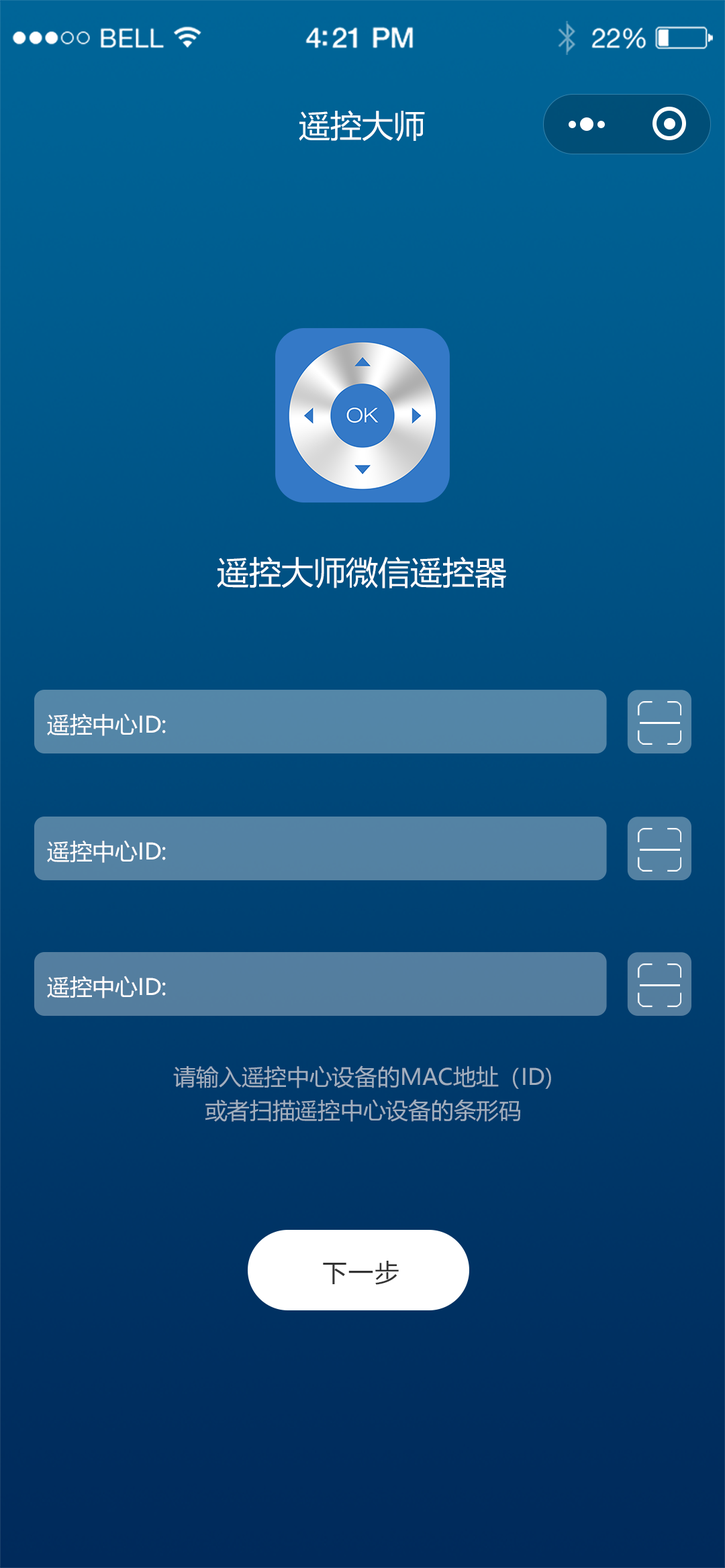
<style>
.page{position:relative;width:725px;height:1568px}
.page>*{position:absolute;margin:0}
.t1{font:31.5px "MicrosoftYaHei";color:#ffffff}
.t2{font:32.2px "MicrosoftYaHei";color:#ffffff}
.t3{font:22.5px "MicrosoftYaHei";color:#ffffff}
.t4{font:22.5px/33.5px "MicrosoftYaHei";color:#a3afbe}
.t5{font:24.5px "MicrosoftYaHei";letter-spacing:0.07em;color:#333333}
</style>
<div class="page">
<p class="t1" style="left:299px;top:110px;width:126px;height:32px">遥控大师</p>
<p class="t2" style="left:217px;top:556px;width:290px;height:32px">遥控大师微信遥控器</p>
<p class="t3" style="left:47px;top:713px;width:119px;height:23px">遥控中心ID:</p>
<p class="t3" style="left:47px;top:840px;width:119px;height:23px">遥控中心ID:</p>
<p class="t3" style="left:47px;top:976px;width:119px;height:22px">遥控中心ID:</p>
<p class="t4" style="left:173px;top:1065px;width:378px;height:57px;text-align:center">请输入遥控中心设备的MAC地址（ID)<br>或者扫描遥控中心设备的条形码</p>
<p class="t5" style="left:323px;top:1261px;width:76px;height:24px">下一步</p>
</div>
